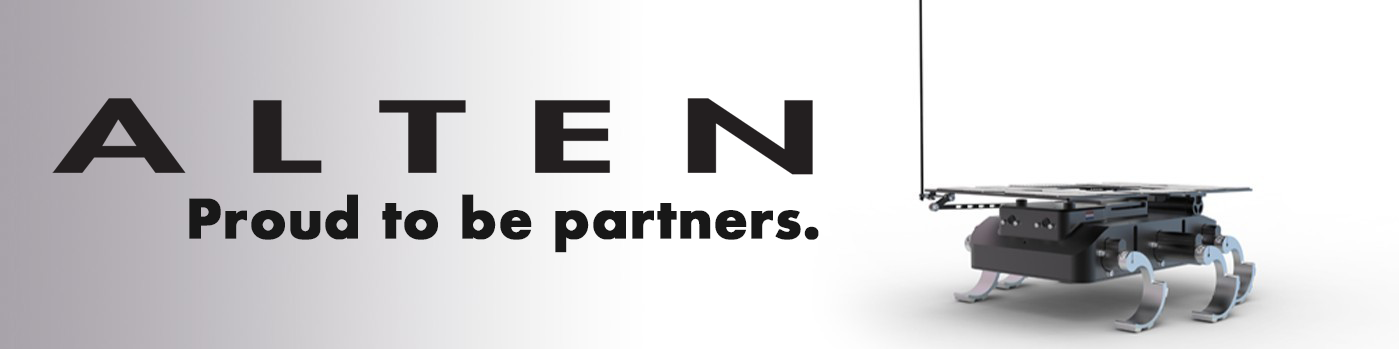
<style>
.page{position:relative;width:1399px;height:349px;background:#ffffff}
.page>*{position:absolute;margin:0}
.t1{font:90px "Futura-Bold";color:#181818;font-weight:bold}
</style>
<div class="page">
<p class="t1" style="left:189px;top:194px;width:630px;height:59px">Proud to be partners.</p>
</div>
